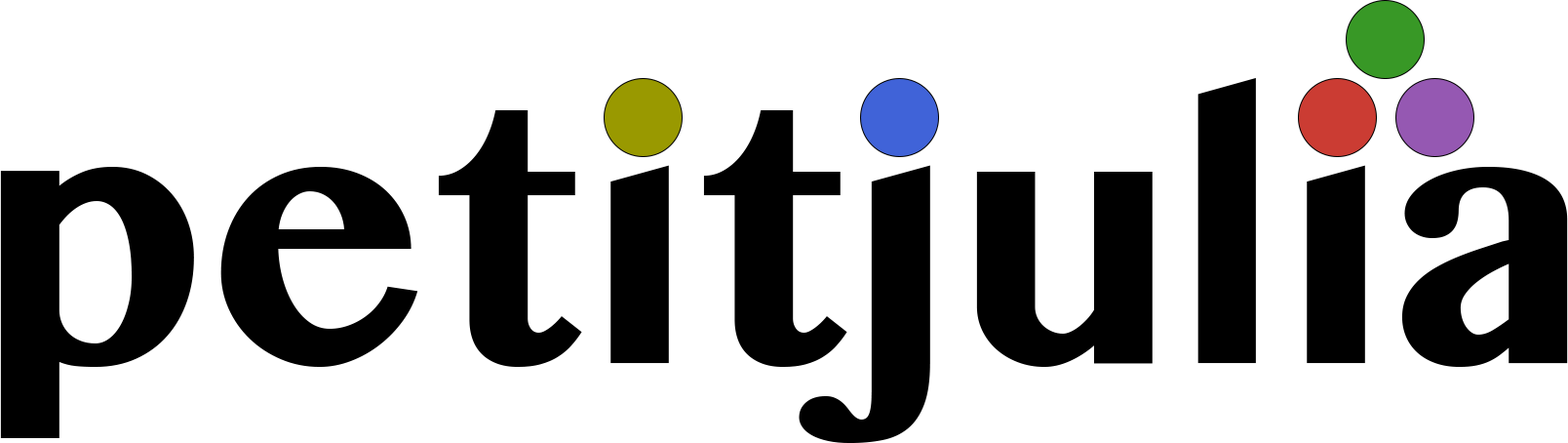
<style>
.page{position:relative;width:1568px;height:443px;background:#ffffff}
.page>*{position:absolute;margin:0}
.t1{font:365.7px "TamilMN-Bold";color:#000000}
</style>
<div class="page">
<p class="t1" style="left:0px;top:78px;width:1568px;height:365px">petitjulia</p>
</div>
